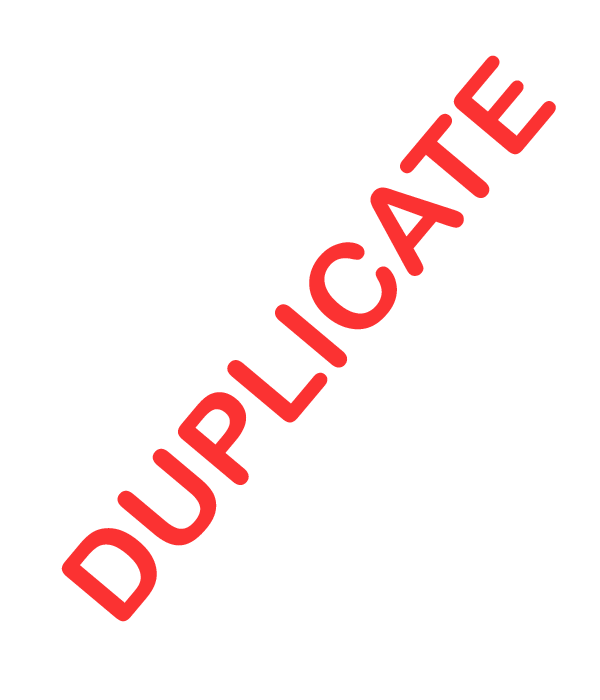
<style>
.page{position:relative;width:600px;height:700px;background:#ffffff}
.page>*{position:absolute;margin:0}
.t1{font:120px "ArialRoundedMTBold";color:#fb3232}
</style>
<div class="page">
<p class="t1" style="left:61px;top:55px;width:495px;height:567px;rotate:-50deg">DUPLICATE</p>
</div>
